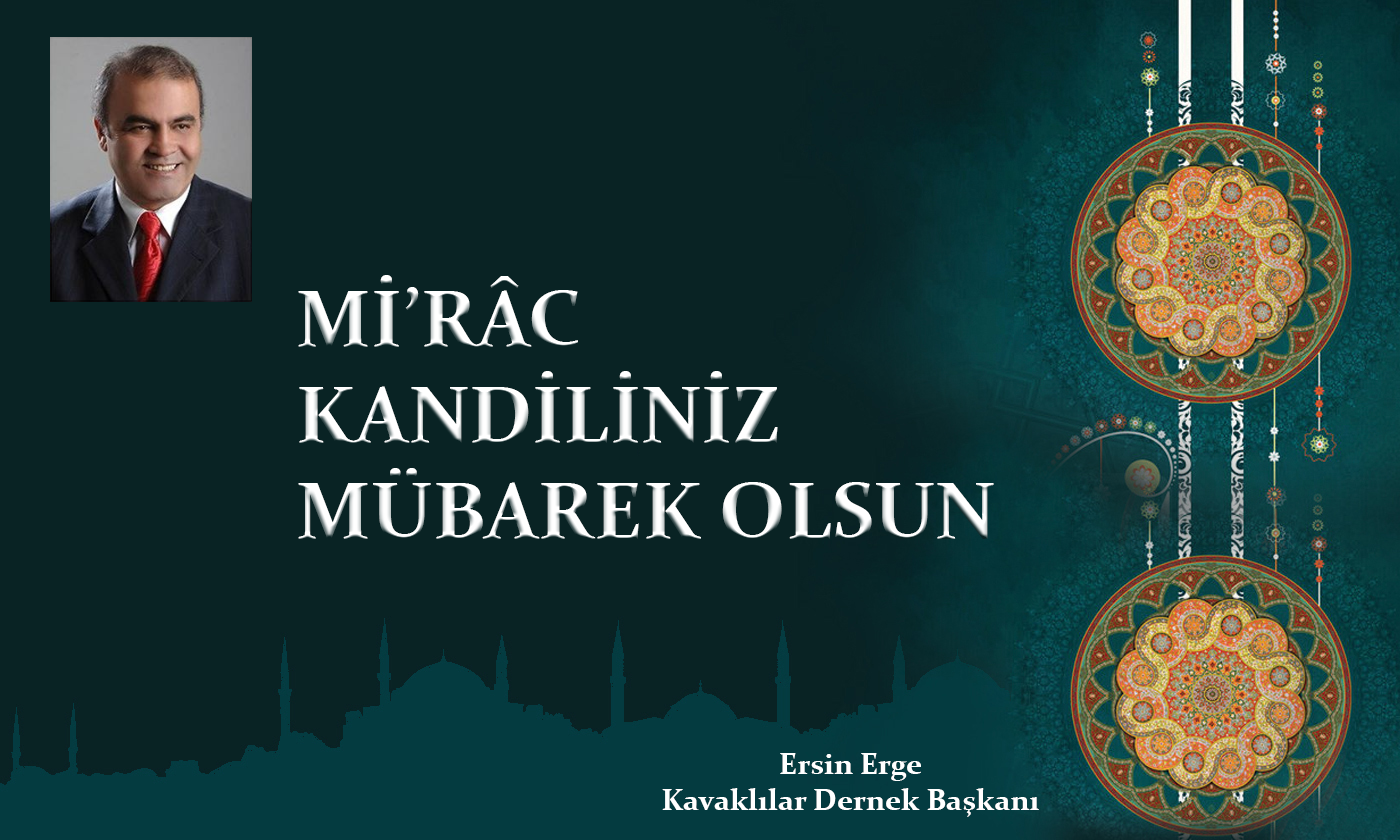
<style>
.page{position:relative;width:1400px;height:840px;background:#092324}
.page>*{position:absolute;margin:0}
.t1{font:80px "Constantia-Bold"}
.t2{font:30px "Constantia-Bold";color:#ffffff}
</style>
<div class="page">
<p class="t1" style="left:298px;top:275px;width:696px;height:265px">Mİ’RÂC<br>KANDİLİNİZ<br>MÜBAREK OLSUN</p>
<p class="t2" style="left:662px;top:753px;width:377px;height:64px;text-align:center">Ersin Erge<br>Kavaklılar Dernek Başkanı</p>
</div>
